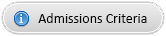
<style>
.page{position:relative;width:166px;height:36px}
.page>*{position:absolute;margin:0}
.t1{font:14px "Calibri";color:#000000}
</style>
<div class="page">
<p class="t1" style="left:38px;top:13px;width:109px;height:10px">Admissions Criteria</p>
</div>
